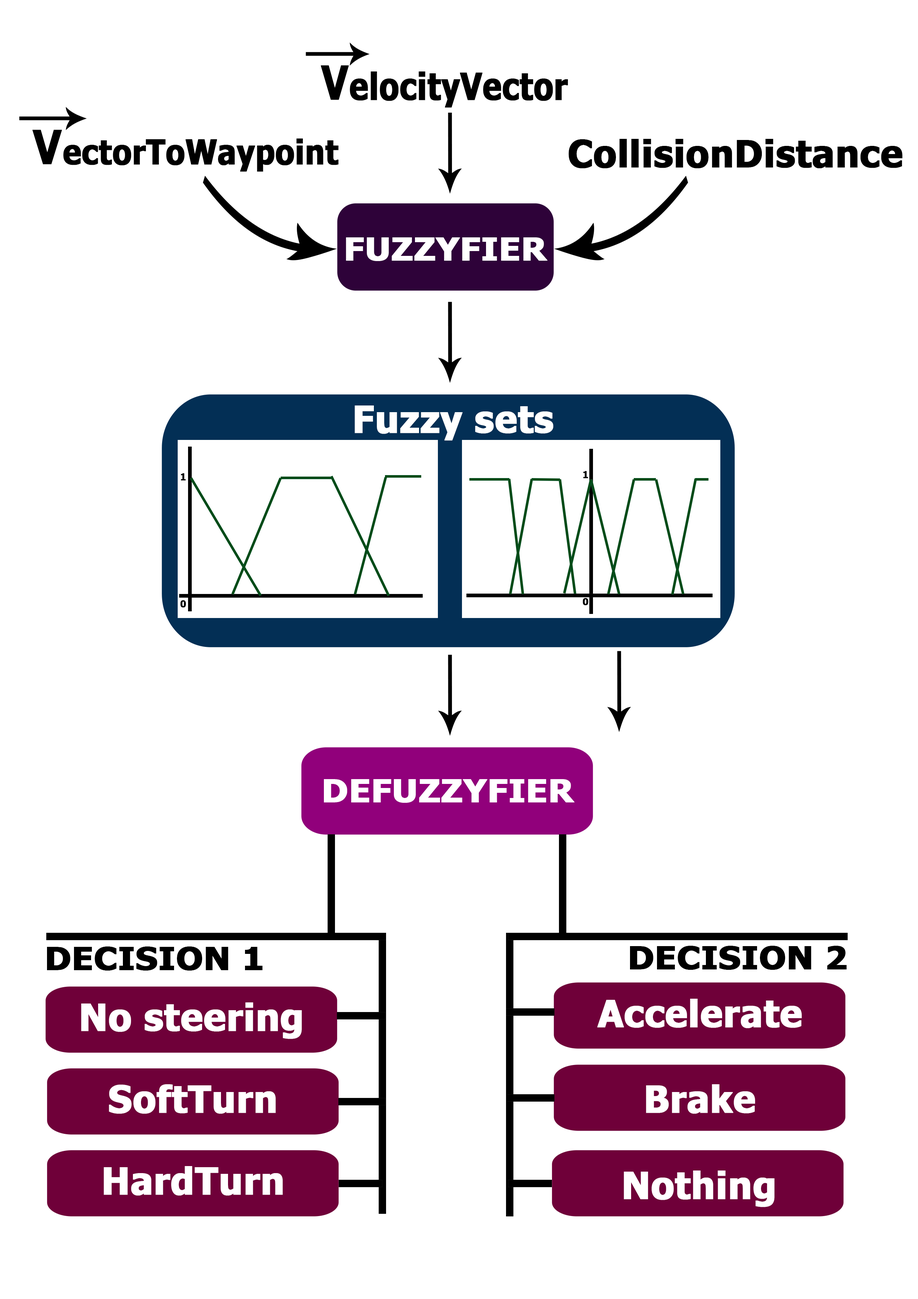
<style>
.page{position:relative;width:918px;height:1299px;background:#ffffff}
.page>*{position:absolute;margin:0}
.t1{font:37px "Tahoma-Bold";color:#000000;font-weight:bold;scale:0.85 1}
.t2{font:46.8px "Tahoma-Bold";color:#000000;font-weight:bold;scale:0.85 1}
.t3{font:33.9px "Tahoma-Bold";color:#000000;font-weight:bold;scale:0.9 1}
.t4{font:46.7px "Tahoma-Bold";color:#000000;font-weight:bold;scale:0.9 1}
.t5{font:37px "Tahoma-Bold";color:#000000;font-weight:bold}
.t6{font:31.5px "Tahoma-Bold";color:#ffffff;font-weight:bold;scale:1.1 1}
.t7{font:37px "Tahoma-Bold";color:#ffffff;font-weight:bold}
.t8{font:9.3px "Tahoma-Bold";color:#000000;font-weight:bold}
.t9{font:31.5px "Tahoma-Bold";color:#000000;font-weight:bold;scale:1.1 1}
</style>
<div class="page">
<p class="t1" style="left:321px;top:65px;width:247px;height:43px"><span class="t2">V</span>elocityVector</p>
<p class="t3" style="left:32px;top:130px;width:307px;height:42px"><span class="t4">V</span>ectorToWaypoint</p>
<p class="t5" style="left:569px;top:139px;width:334px;height:29px">CollisionDistance</p>
<p class="t6" style="left:346px;top:237px;width:202px;height:24px">FUZZYFIER</p>
<p class="t7" style="left:355px;top:405px;width:198px;height:36px">Fuzzy sets</p>
<p class="t8" style="left:181px;top:473px;width:5px;height:8px">1</p>
<p class="t8" style="left:583px;top:471px;width:5px;height:7px">1</p>
<p class="t8" style="left:180px;top:600px;width:6px;height:8px">0</p>
<p class="t8" style="left:583px;top:598px;width:6px;height:7px">0</p>
<p class="t6" style="left:324px;top:779px;width:251px;height:24px">DEFUZZYFIER</p>
<p class="t9" style="left:47px;top:946px;width:215px;height:24px">DECISION 1</p>
<p class="t9" style="left:630px;top:946px;width:217px;height:24px">DECISION 2</p>
<p class="t7" style="left:597px;top:998px;width:205px;height:30px">Accelerate</p>
<p class="t7" style="left:81px;top:1002px;width:221px;height:37px">No steering</p>
<p class="t7" style="left:109px;top:1084px;width:167px;height:30px">SoftTurn</p>
<p class="t7" style="left:646px;top:1084px;width:109px;height:30px">Brake</p>
<p class="t7" style="left:104px;top:1166px;width:179px;height:29px">HardTurn</p>
<p class="t7" style="left:624px;top:1170px;width:151px;height:37px">Nothing</p>
</div>
